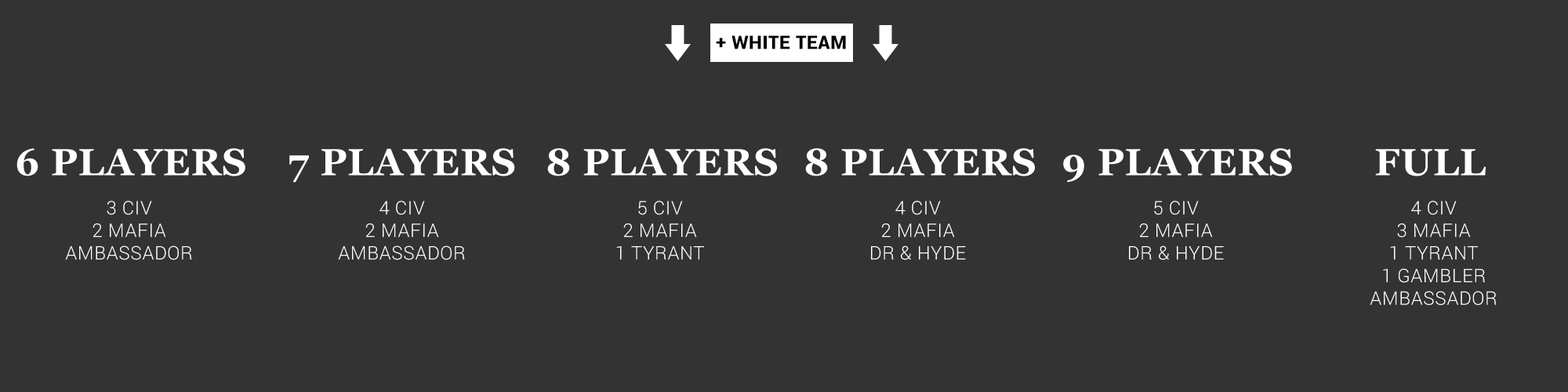
<style>
.page{position:relative;width:1568px;height:392px;background:#333333}
.page>*{position:absolute;margin:0}
.t1{font:18.8px "Roboto-Black";letter-spacing:0.025em;color:#000000}
.t2{font:37.6px "Georgia-Bold";letter-spacing:0.025em;color:#ffffff}
.t3{font:18.8px "Roboto-Light";letter-spacing:0.025em;color:#ffffff}
</style>
<div class="page">
<p class="t1" style="left:716px;top:35px;width:130px;height:14px">+ WHITE TEAM</p>
<p class="t2" style="left:16px;top:148px;width:229px;height:28px">6 PLAYERS</p>
<p class="t2" style="left:289px;top:148px;width:226px;height:35px">7 PLAYERS</p>
<p class="t2" style="left:547px;top:148px;width:230px;height:28px">8 PLAYERS</p>
<p class="t2" style="left:805px;top:148px;width:230px;height:28px">8 PLAYERS</p>
<p class="t2" style="left:1063px;top:148px;width:229px;height:35px">9 PLAYERS</p>
<p class="t2" style="left:1375px;top:149px;width:111px;height:27px">FULL</p>
<p class="t3" style="left:65px;top:201px;width:127px;height:59px;text-align:center">3 CIV<br>2 MAFIA<br>AMBASSADOR</p>
<p class="t3" style="left:338px;top:201px;width:127px;height:59px;text-align:center">4 CIV<br>2 MAFIA<br>AMBASSADOR</p>
<p class="t3" style="left:616px;top:201px;width:88px;height:59px;text-align:center">5 CIV<br>2 MAFIA<br>1 TYRANT</p>
<p class="t3" style="left:871px;top:201px;width:95px;height:59px;text-align:center">4 CIV<br>2 MAFIA<br>DR &amp; HYDE</p>
<p class="t3" style="left:1129px;top:201px;width:95px;height:59px;text-align:center">5 CIV<br>2 MAFIA<br>DR &amp; HYDE</p>
<p class="t3" style="left:1370px;top:201px;width:127px;height:104px;text-align:center">4 CIV<br>3 MAFIA<br>1 TYRANT<br>1 GAMBLER<br>AMBASSADOR</p>
</div>
